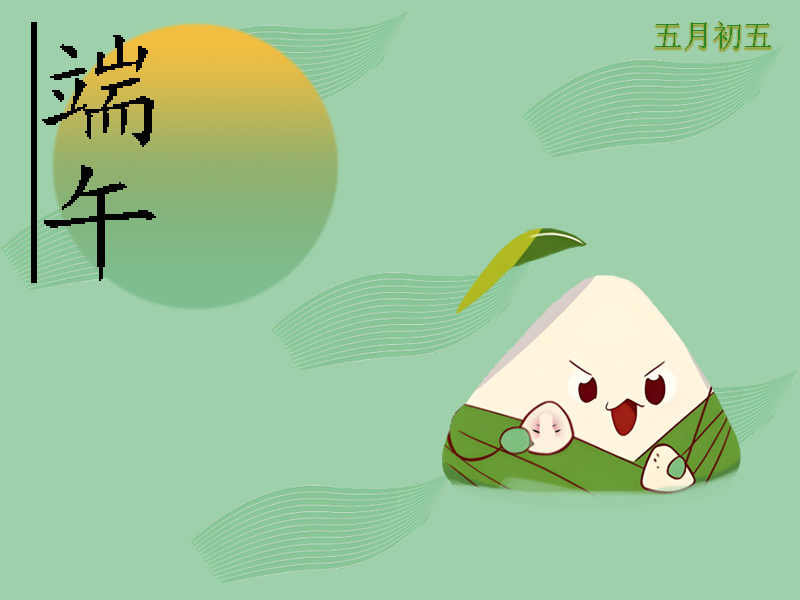
<style>
.page{position:relative;width:800px;height:600px;background:#9ed1ab}
.page>*{position:absolute;margin:0}
.t1{font:130px "¿¬Ìå";color:#030303;text-decoration:underline}
.t2{font:30px "SimSun";color:#2f8626}
</style>
<div class="page">
<p class="t1" style="left:31px;top:22px;width:125px;height:261px">端午</p>
<p class="t2" style="left:655px;top:21px;width:116px;height:28px">五月初五</p>
</div>
